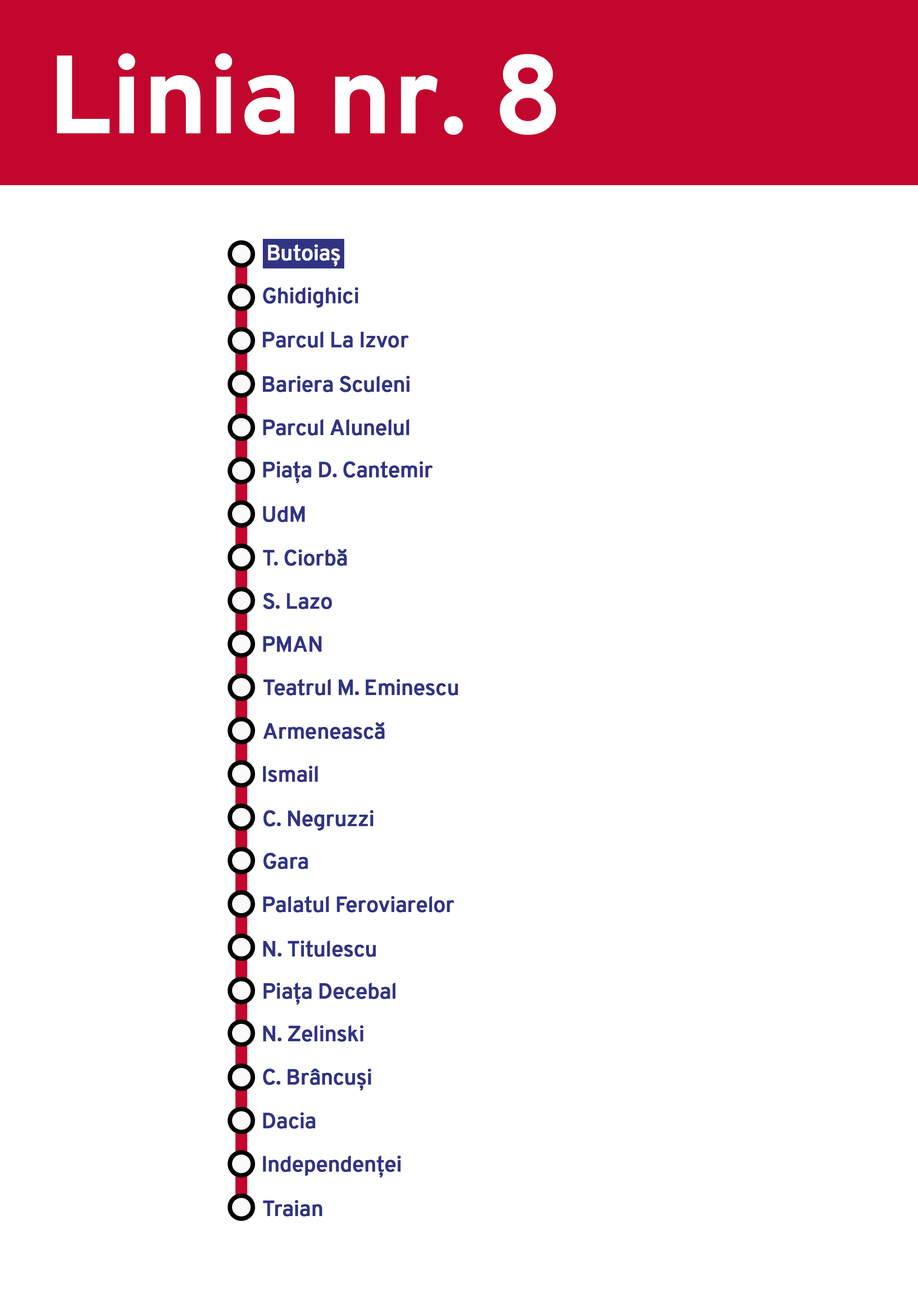
<style>
.page{position:relative;width:918px;height:1299px;background:#ffffff}
.page>*{position:absolute;margin:0}
.t1{font:111.1px "Overpass-Bold";color:#ffffff}
.t2{font:21.6px "Overpass-Reg";letter-spacing:-0.025em;color:#ffffff;font-weight:bold}
.t3{font:21.6px "Overpass-Reg";letter-spacing:-0.025em;color:#313484;font-weight:bold}
</style>
<div class="page">
<p class="t1" style="left:57px;top:53px;width:499px;height:82px">Linia nr. 8</p>
<p class="t2" style="left:268px;top:244px;width:72px;height:22px">Butoiaș</p>
<p class="t3" style="left:263px;top:287px;width:95px;height:21px">Ghidighici</p>
<p class="t3" style="left:263px;top:331px;width:146px;height:17px">Parcul La Izvor</p>
<p class="t3" style="left:263px;top:376px;width:147px;height:16px">Bariera Sculeni</p>
<p class="t3" style="left:263px;top:419px;width:146px;height:16px">Parcul Alunelul</p>
<p class="t3" style="left:263px;top:461px;width:170px;height:22px">Piața D. Cantemir</p>
<p class="t3" style="left:263px;top:506px;width:42px;height:16px">UdM</p>
<p class="t3" style="left:263px;top:549px;width:84px;height:17px">T. Ciorbă</p>
<p class="t3" style="left:263px;top:593px;width:69px;height:16px">S. Lazo</p>
<p class="t3" style="left:263px;top:636px;width:59px;height:16px">PMAN</p>
<p class="t3" style="left:263px;top:679px;width:195px;height:16px">Teatrul M. Eminescu</p>
<p class="t3" style="left:263px;top:722px;width:122px;height:17px">Armenească</p>
<p class="t3" style="left:263px;top:766px;width:55px;height:16px">Ismail</p>
<p class="t3" style="left:263px;top:810px;width:111px;height:20px">C. Negruzzi</p>
<p class="t3" style="left:263px;top:853px;width:45px;height:16px">Gara</p>
<p class="t3" style="left:263px;top:896px;width:191px;height:16px">Palatul Feroviarelor</p>
<p class="t3" style="left:263px;top:940px;width:113px;height:17px">N. Titulescu</p>
<p class="t3" style="left:264px;top:983px;width:132px;height:21px">Piața Decebal</p>
<p class="t3" style="left:263px;top:1025px;width:101px;height:16px">N. Zelinski</p>
<p class="t3" style="left:263px;top:1068px;width:108px;height:22px">C. Brâncuși</p>
<p class="t3" style="left:263px;top:1112px;width:52px;height:16px">Dacia</p>
<p class="t3" style="left:263px;top:1155px;width:138px;height:22px">Independenței</p>
<p class="t3" style="left:263px;top:1200px;width:59px;height:16px">Traian</p>
</div>
